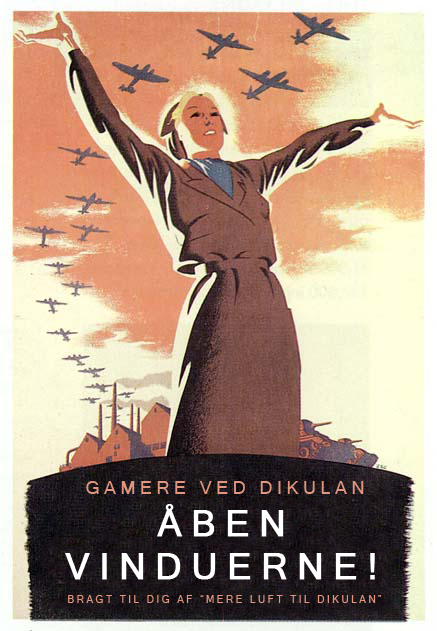
<style>
.page{position:relative;width:437px;height:631px}
.page>*{position:absolute;margin:0}
.t1{font:18px "MicrosoftSansSerif";letter-spacing:0.25em;color:#e1967f;text-transform:uppercase}
.t2{font:36px "MicrosoftSansSerif";letter-spacing:0.25em;color:#ffffff;text-transform:uppercase;font-weight:bold}
.t3{font:10px "MicrosoftSansSerif";letter-spacing:0.25em;color:#e1967f;text-transform:uppercase}
</style>
<div class="page">
<p class="t1" style="left:86px;top:481px;width:278px;height:13px">Gamere ved dikulan</p>
<p class="t2" style="left:65px;top:504px;width:310px;height:76px;text-align:center">åben<br>vinduerne!</p>
<p class="t3" style="left:68px;top:595px;width:313px;height:8px">Bragt til dig af “Mere luft til DIKULAN”</p>
</div>
